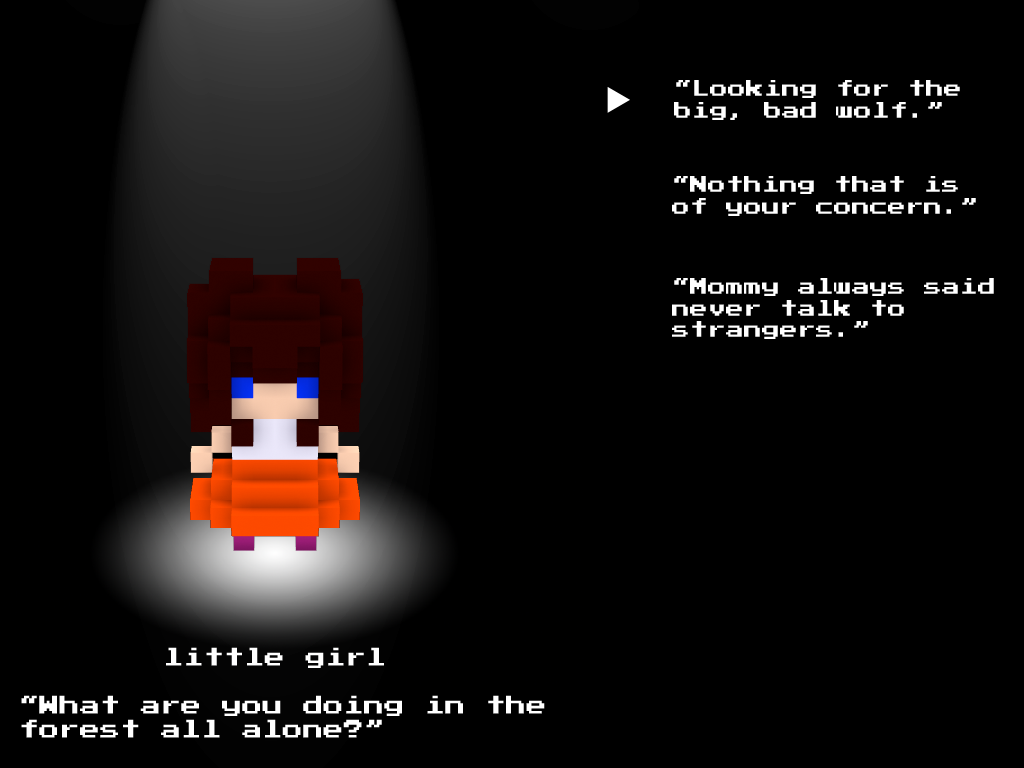
<style>
.page{position:relative;width:1024px;height:768px;background:#000000}
.page>*{position:absolute;margin:0}
.t1{font:18px "PressStart2P";color:#ffffff}
.t2{font:20.3px "PressStart2P";color:#ffffff}
</style>
<div class="page">
<p class="t1" style="left:674px;top:80px;width:286px;height:40px">“Looking for the <br>big, bad wolf.”</p>
<p class="t1" style="left:672px;top:176px;width:304px;height:40px">“Nothing that is<br>of your concern.”</p>
<p class="t1" style="left:672px;top:278px;width:322px;height:61px">“Mommy always said<br>never talk to<br>strangers.”</p>
<p class="t2" style="left:166px;top:647px;width:218px;height:21px">little girl</p>
<p class="t2" style="left:21px;top:695px;width:524px;height:43px">“What are you doing in the <br>forest all alone?”</p>
</div>
